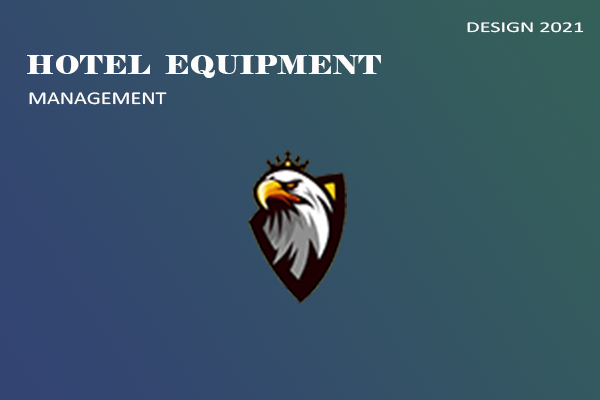
<style>
.page{position:relative;width:600px;height:400px}
.page>*{position:absolute;margin:0}
.t1{font:15.1px "Calibri";color:#fdfdfd;scale:1.47 1}
.t2{font:26px "Elephant-Regular";color:#fdfdfd;scale:1.09 1}
.t3{font:18px "Calibri";color:#fdfdfd;scale:1.23 1}
</style>
<div class="page">
<p class="t1" style="left:467px;top:22px;width:117px;height:11px">DESIGN 2021</p>
<p class="t2" style="left:27px;top:55px;width:354px;height:23px">HOTEL  EQUIPMENT</p>
<p class="t3" style="left:29px;top:92px;width:138px;height:13px">MANAGEMENT</p>
</div>
